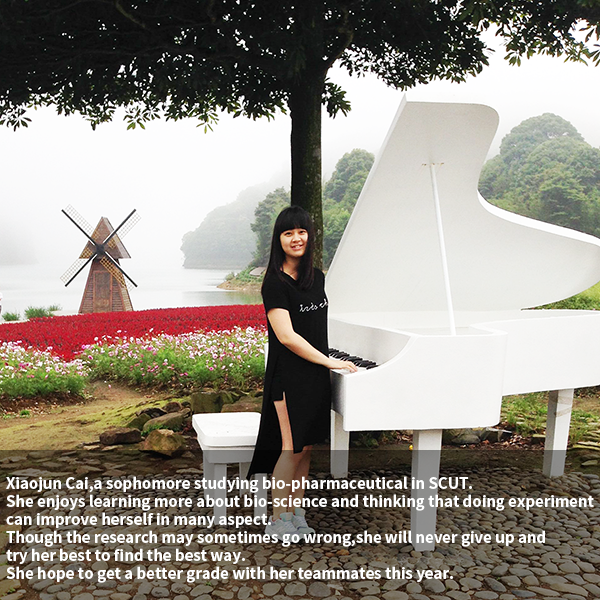
<style>
.page{position:relative;width:600px;height:600px}
.page>*{position:absolute;margin:0}
.t1{font:15px/18px "SourceHanSansCN-Bold";color:#ffffff}
</style>
<div class="page">
<p class="t1" style="left:6px;top:476px;width:588px;height:107px;text-align:justify">Xiaojun Cai,a sophomore studying bio-pharmaceutical in SCUT.<br>She enjoys learning more about bio-science and thinking that doing experiment <br>can improve herself in many aspect.<br>Though the research may sometimes go wrong,she will never give up and <br>try her best to find the best way.<br>She hope to get a better grade with her teammates this year.</p>
</div>
